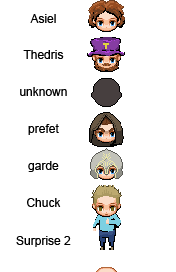
<style>
.page{position:relative;width:176px;height:272px;background:#ffffff}
.page>*{position:absolute;margin:0}
.t1{font:12px "ArialMT";color:#000000}
</style>
<div class="page">
<p class="t1" style="left:30px;top:14px;width:26px;height:9px">Asiel</p>
<p class="t1" style="left:23px;top:50px;width:41px;height:9px">Thedris</p>
<p class="t1" style="left:20px;top:87px;width:47px;height:9px">unknown</p>
<p class="t1" style="left:28px;top:124px;width:31px;height:11px">prefet</p>
<p class="t1" style="left:28px;top:161px;width:31px;height:11px">garde</p>
<p class="t1" style="left:27px;top:198px;width:34px;height:9px">Chuck</p>
<p class="t1" style="left:16px;top:236px;width:55px;height:11px">Surprise 2</p>
</div>
